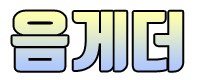
<style>
.page{position:relative;width:200px;height:80px;background:#ffffff}
.page>*{position:absolute;margin:0}
.t1{font:64px "TmonMonsoriBlack";letter-spacing:0.1em;color:#feffae}
.t2{font:64px "TmonMonsoriBlack";letter-spacing:0.1em;color:#aec7ff}
</style>
<div class="page">
<p class="t1" style="left:12px;top:11px;width:171px;height:60px">음게<span class="t2">더</span></p>
</div>
